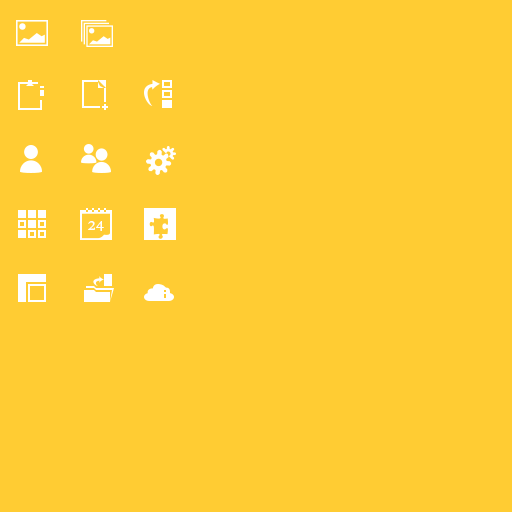
<style>
.page{position:relative;width:512px;height:512px;background:#ffcc33}
.page>*{position:absolute;margin:0}
.t1{font:18px "AdobeGurmukhi-Regular";letter-spacing:0.01em;color:#ffffff}
</style>
<div class="page">
<p class="t1" style="left:88px;top:221px;width:16px;height:10px">24</p>
</div>
